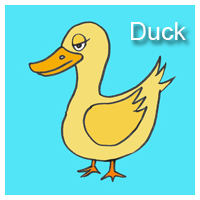
<style>
.page{position:relative;width:200px;height:200px;background:#52e5f7}
.page>*{position:absolute;margin:0}
.t1{font:25px "ArialMT";color:#ffffff}
</style>
<div class="page">
<p class="t1" style="left:131px;top:22px;width:55px;height:18px">Duck</p>
</div>
